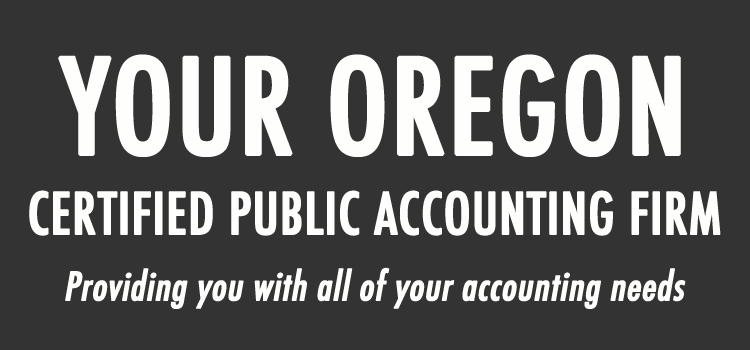
<style>
.page{position:relative;width:750px;height:350px;background:#333333}
.page>*{position:absolute;margin:0}
.t1{font:128px "Futura-CondensedMedium";color:#fefefc;font-weight:bold}
.t2{font:56px "Futura-CondensedMedium";color:#fefefc;font-weight:bold}
.t3{font:38px "Futura-CondensedMedium";color:#fefefc;font-weight:bold;font-style:italic}
</style>
<div class="page">
<p class="t1" style="left:58px;top:54px;width:623px;height:103px">YOUR OREGON</p>
<p class="t2" style="left:29px;top:190px;width:692px;height:46px">CERTIFIED PUBLIC ACCOUNTING FIRM</p>
<p class="t3" style="left:65px;top:267px;width:621px;height:42px">Providing you with all of your accounting needs</p>
</div>
